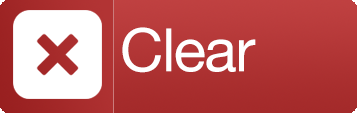
<style>
.page{position:relative;width:357px;height:113px}
.page>*{position:absolute;margin:0}
.t1{font:60px "HelveticaNeue";letter-spacing:-0.025em;color:#ffffff}
</style>
<div class="page">
<p class="t1" style="left:122px;top:27px;width:134px;height:46px">Clear</p>
</div>
